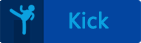
<style>
.page{position:relative;width:141px;height:43px;background:#0345a0}
.page>*{position:absolute;margin:0}
.t1{font:21.7px "SegoeUI";color:#0ba1e0;font-weight:bold}
</style>
<div class="page">
<p class="t1" style="left:69px;top:11px;width:40px;height:18px">Kick</p>
</div>
